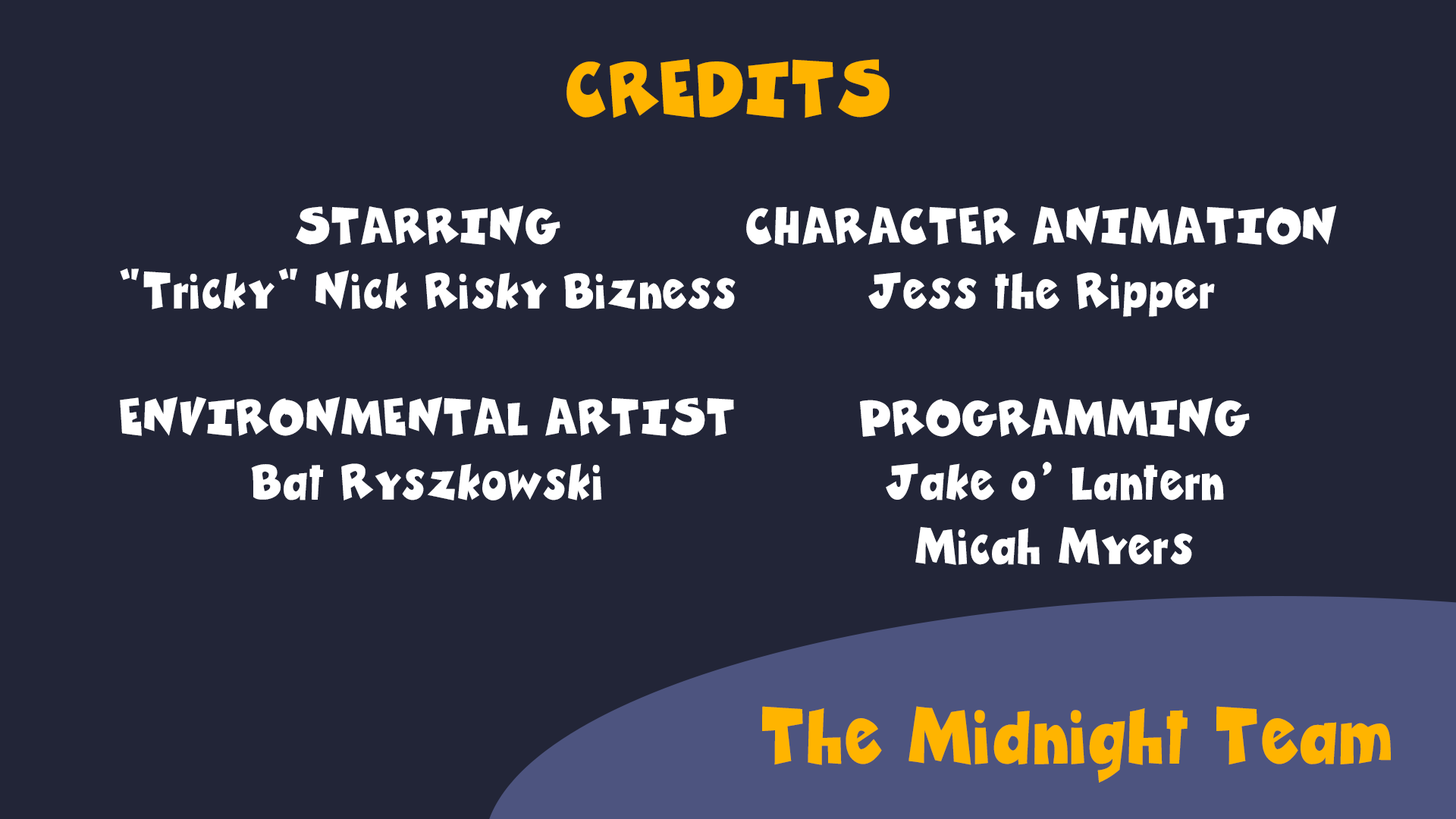
<style>
.page{position:relative;width:1456px;height:819px;background:#222537}
.page>*{position:absolute;margin:0}
.t1{font:82px "ZubiloBlack";color:#ffb400;scale:0.9 1}
.t2{font:53.6px "ZubiloBlack";color:#ffffff;scale:0.9 1}
</style>
<div class="page">
<p class="t1" style="left:566px;top:59px;width:324px;height:59px">CREDITS</p>
<p class="t2" style="left:120px;top:206px;width:616px;height:103px;text-align:center">STARRING<br>“Tricky” Nick Risky Bizness</p>
<p class="t2" style="left:746px;top:206px;width:591px;height:111px;text-align:center">CHARACTER ANIMATION<br>Jess the Ripper</p>
<p class="t2" style="left:120px;top:397px;width:614px;height:104px;text-align:center">ENVIRONMENTAL ARTIST<br>Bat Ryszkowski</p>
<p class="t2" style="left:860px;top:397px;width:390px;height:168px;text-align:center">PROGRAMMING<br>Jake o’ Lantern<br>Micah Myers</p>
<p class="t1" style="left:762px;top:706px;width:629px;height:77px">The Midnight Team</p>
</div>
